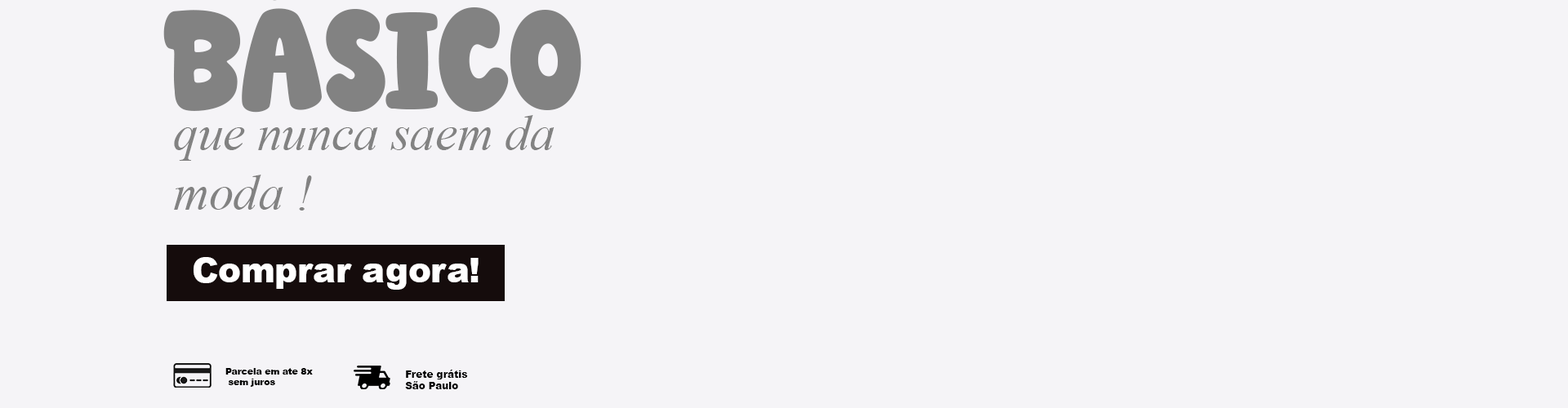
<style>
.page{position:relative;width:1568px;height:408px;background:#f5f4f7}
.page>*{position:absolute;margin:0}
.t1{font:49.6px "TimesNewRomanPS-ItalicMT";color:#828282}
.t2{font:34px "Arial-Black";color:#ffffff}
.t3{font:8.8px "Arial-Black";color:#000000}
.t4{font:9.8px "Arial-Black";color:#000000}
</style>
<div class="page">
<p class="t1" style="left:174px;top:115px;width:381px;height:96px">que nunca saem da moda !</p>
<p class="t2" style="left:194px;top:257px;width:285px;height:33px">Comprar agora!</p>
<p class="t3" style="left:225px;top:368px;width:88px;height:19px">Parcela em ate 8x<br> sem juros</p>
<p class="t4" style="left:405px;top:370px;width:63px;height:20px">Frete grátis<br>São Paulo</p>
</div>
